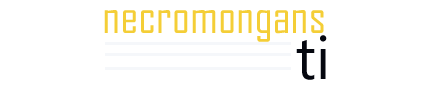
<style>
.page{position:relative;width:425px;height:85px;background:#ffffff}
.page>*{position:absolute;margin:0}
.t1{font:48px "AgencyFB-Reg";color:#f4ce37}
.t2{font:60px "Gadugi";color:#05070f}
</style>
<div class="page">
<p class="t1" style="left:104px;top:10px;width:220px;height:32px">necromongans</p>
<p class="t2" style="left:296px;top:35px;width:31px;height:45px">ti</p>
</div>
